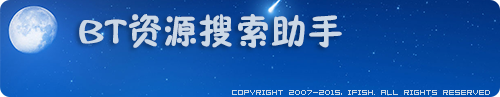
<style>
.page{position:relative;width:500px;height:97px}
.page>*{position:absolute;margin:0}
.t1{font:36px "FZSEJW--GB1-0";color:#cbd8e6}
.t2{font:6px "04b08";color:#cbd8e6}
</style>
<div class="page">
<p class="t1" style="left:79px;top:14px;width:263px;height:34px">BT资源搜索助手</p>
<p class="t2" style="left:232px;top:90px;width:258px;height:5px">COPYRIGHT 2007-2015, iFish. ALL RIGHTS RESERVED</p>
</div>
